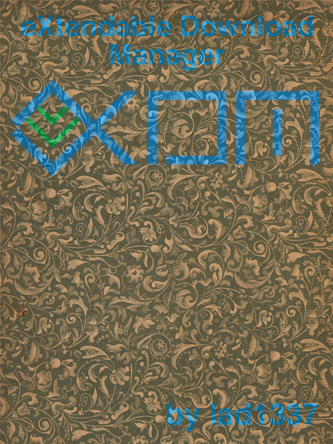
<style>
.page{position:relative;width:333px;height:444px}
.page>*{position:absolute;margin:0}
.t1{font:28.3px "Helvetica-Bold"}
.t2{font:30px "Helvetica-Bold"}
</style>
<div class="page">
<p class="t1" style="left:21px;top:15px;width:292px;height:22px">eXtendable Download</p>
<p class="t1" style="left:110px;top:44px;width:115px;height:27px">Manager</p>
<p class="t2" style="left:167px;top:403px;width:151px;height:29px">by lad1337</p>
</div>
